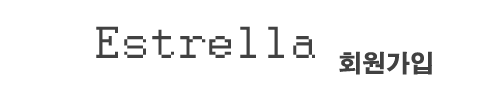
<style>
.page{position:relative;width:496px;height:89px;background:#ffffff}
.page>*{position:absolute;margin:0}
.t1{font:50px "Courier";color:#414141}
.t2{font:24px "AdobeGothicStd-Bold";color:#414141}
</style>
<div class="page">
<p class="t1" style="left:96px;top:26px;width:219px;height:32px">Estrella</p>
<p class="t2" style="left:339px;top:51px;width:93px;height:24px">회원가입</p>
</div>
